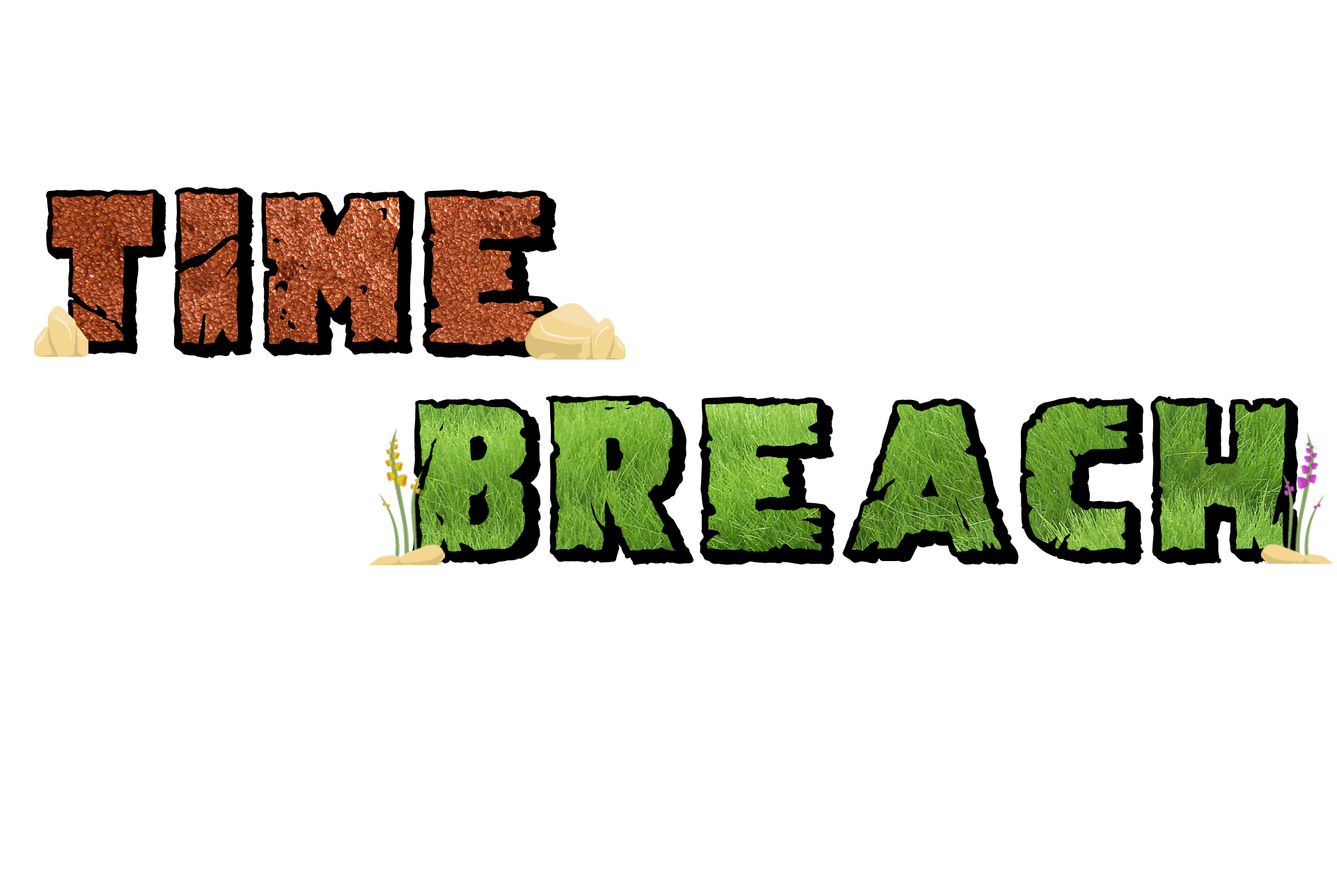
<style>
.page{position:relative;width:1337px;height:892px;background:#ffffff}
.page>*{position:absolute;margin:0}
.t1{font:103.2px "DemolitionCrackShadow";color:#000000}
</style>
<div class="page">
<p class="t1" style="left:46px;top:187px;width:513px;height:171px">TIME</p>
<p class="t1" style="left:412px;top:395px;width:887px;height:170px">BREACH</p>
</div>
